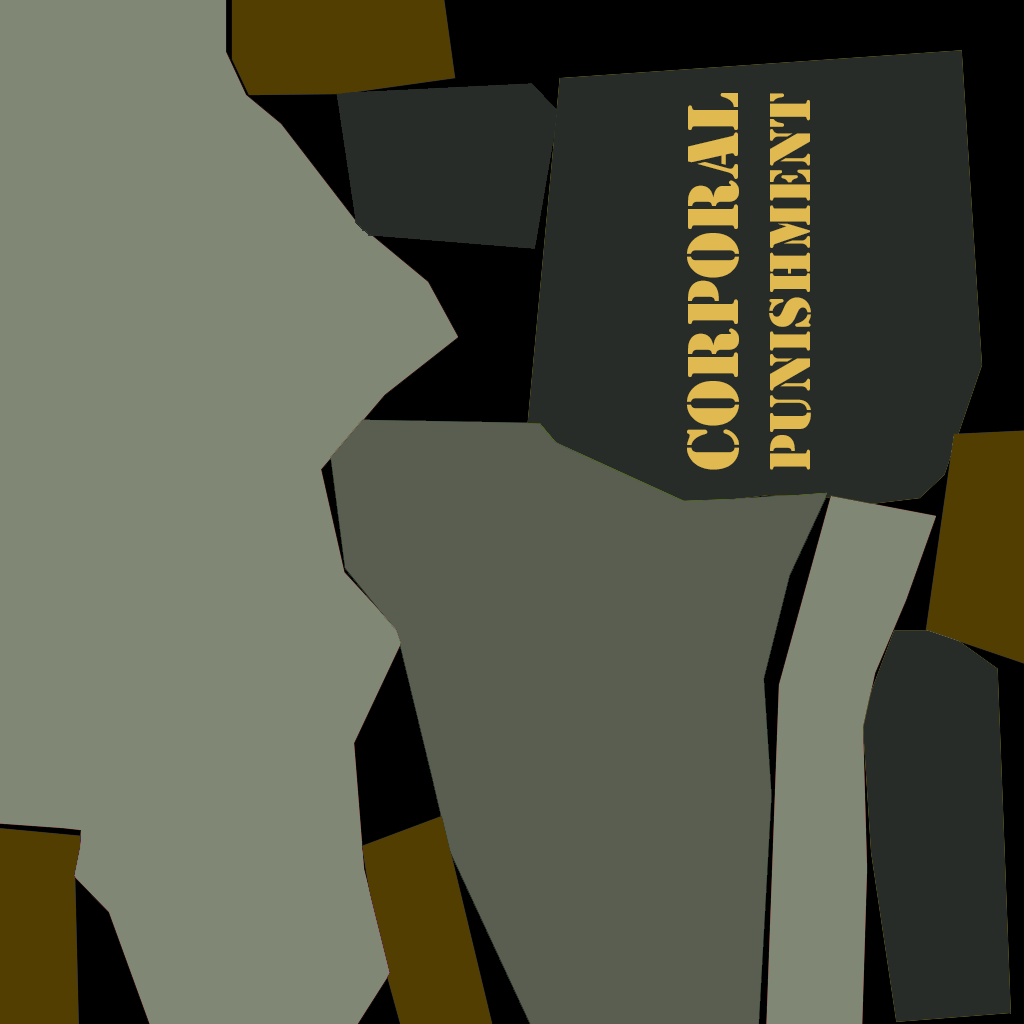
<style>
.page{position:relative;width:1024px;height:1024px;background:#808774}
.page>*{position:absolute;margin:0}
.t1{font:60px "Stencil";color:#e0ba50}
.t2{font:75px "Stencil";color:#e0ba50}
</style>
<div class="page">
<p class="t1" style="left:687px;top:93px;width:124px;height:377px;text-align:center;rotate:-90deg"><span class="t2">Corporal<br></span>Punishment</p>
</div>
